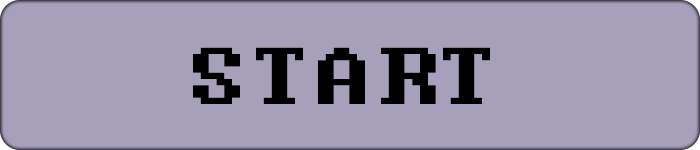
<style>
.page{position:relative;width:700px;height:150px;background:#a7a0ba}
.page>*{position:absolute;margin:0}
.t1{font:100px "Terminal";color:#000000}
</style>
<div class="page">
<p class="t1" style="left:193px;top:47px;width:297px;height:57px">START</p>
</div>
